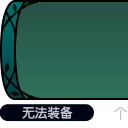
<style>
.page{position:relative;width:128px;height:128px}
.page>*{position:absolute;margin:0}
.t1{font:12.7px "FZY3--GB1-4";letter-spacing:0.025em;color:#c4c4d0;scale:0.97 1}
.t2{font:14.7px "FZY3--GB1-4";letter-spacing:0.025em;color:#c7c7c7;scale:0.97 1}
</style>
<div class="page">
<p class="t1" style="left:22px;top:106px;width:51px;height:13px">无法装备</p>
<p class="t2" style="left:113px;top:107px;width:15px;height:14px">个</p>
</div>
